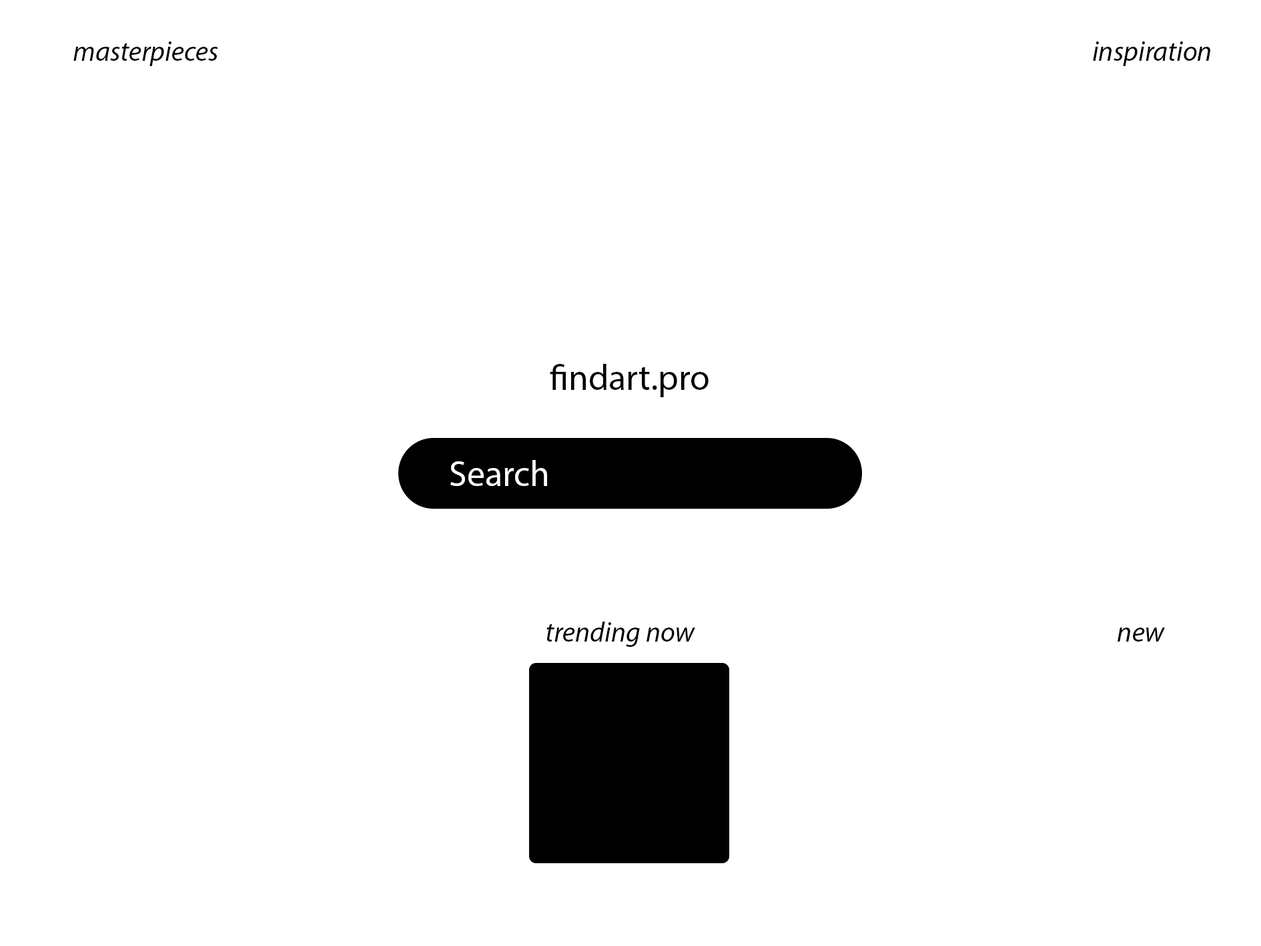
<style>
.page{position:relative;width:1261px;height:946px;background:#ffffff}
.page>*{position:absolute;margin:0}
.t1{font:27.8px "MyriadPro-It";color:#000000}
.t2{font:36px "MyriadPro-Regular";color:#000000}
.t3{font:36px "MyriadPro-Regular";color:#ffffff}
</style>
<div class="page">
<p class="t1" style="left:73px;top:41px;width:145px;height:25px">masterpieces</p>
<p class="t1" style="left:1093px;top:41px;width:117px;height:25px">inspiration</p>
<p class="t2" style="left:550px;top:364px;width:159px;height:33px">findart.pro</p>
<p class="t3" style="left:450px;top:460px;width:97px;height:26px">Search</p>
<p class="t1" style="left:546px;top:621px;width:149px;height:26px">trending now</p>
<p class="t1" style="left:1118px;top:627px;width:47px;height:14px">new</p>
</div>
